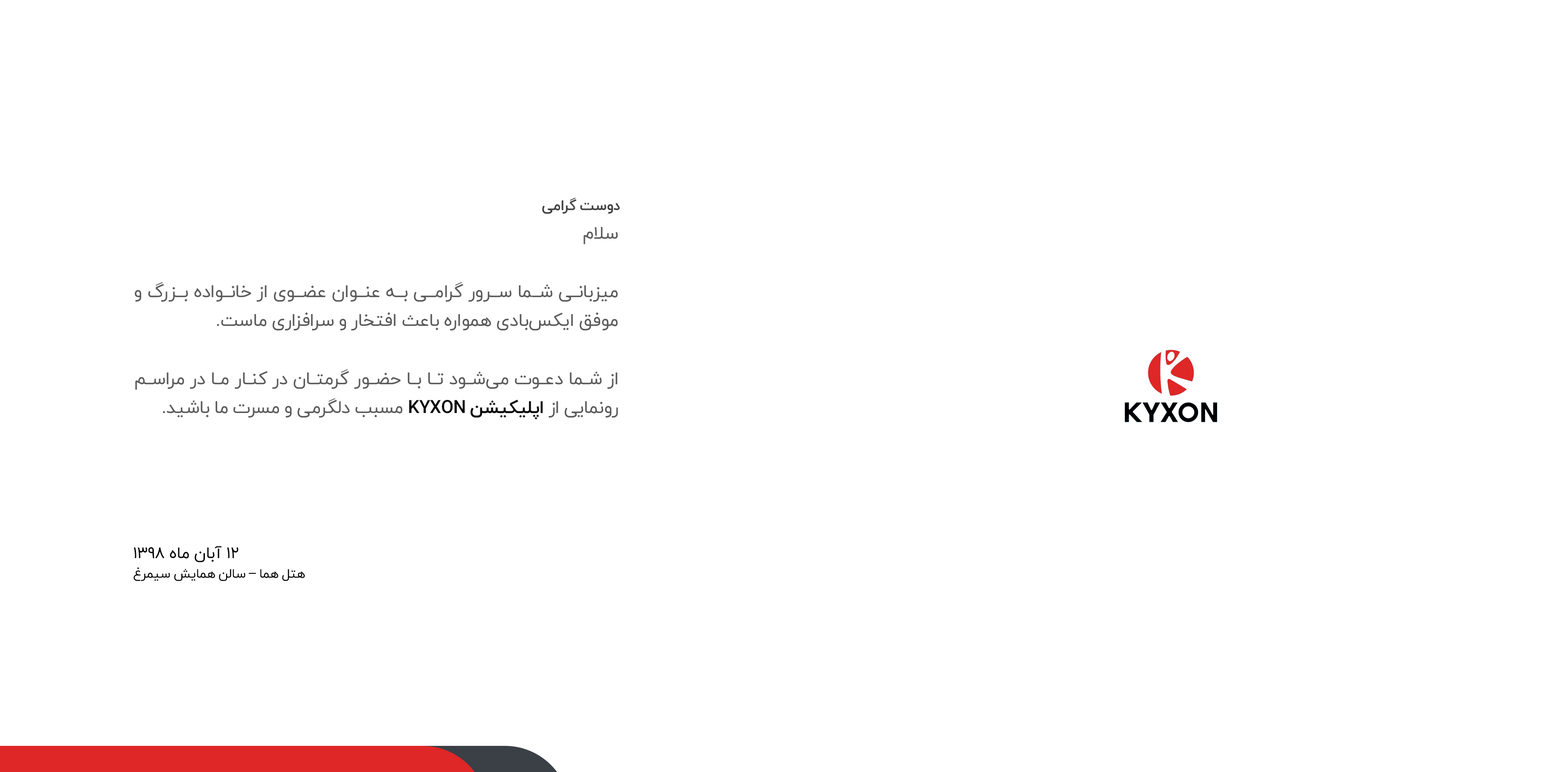
<style>
.page{position:relative;width:1544px;height:772px;background:#ffffff}
.page>*{position:absolute;margin:0}
.t1{font:14.8px "IRANYekan-Bold";letter-spacing:-0.02em;color:#424242;text-transform:uppercase}
.t2{font:18.2px/29.1px "IRANYekan";letter-spacing:-0.02em;color:#5a5a5a;text-transform:uppercase}
.t3{font:18.2px/29.1px "IRANYekan-Bold";letter-spacing:-0.02em;color:#080808;text-transform:uppercase}
.t4{font:16.4px/19.5px "IRANYekan";letter-spacing:-0.02em;color:#000000;text-transform:uppercase}
.t5{font:13.1px/19.5px "IRANYekan";letter-spacing:-0.02em;color:#000000;text-transform:uppercase}
.t6{font:13.1px/19.5px "Tahoma";letter-spacing:-0.02em;color:#000000;text-transform:uppercase}
</style>
<div class="page">
<p class="t1" style="left:542px;top:197px;width:78px;height:17px">دوست گرامی</p>
<p class="t2" style="left:135px;top:227px;width:483px;height:193px;text-align:justify">سلام<br><br>میزبانی شما سرور گرامی به عنوان عضوی از خانواده بزرگ و موفق ایکس‌بادی همواره باعث افتخار و سرافزاری ماست.<br><br>از شما دعوت می‌شود تا با حضور گرمتان در کنار ما در مراسم رونمایی از <span class="t3">اپلیکیشن KYXON </span>مسبب دلگرمی و مسرت ما باشید.</p>
<p class="t4" style="left:133px;top:546px;width:172px;height:35px">12 آبان ماه 1398<br><span class="t5">هتل هما </span><span class="t6">–</span><span class="t5"> سالن همایش سیمرغ</span></p>
</div>
